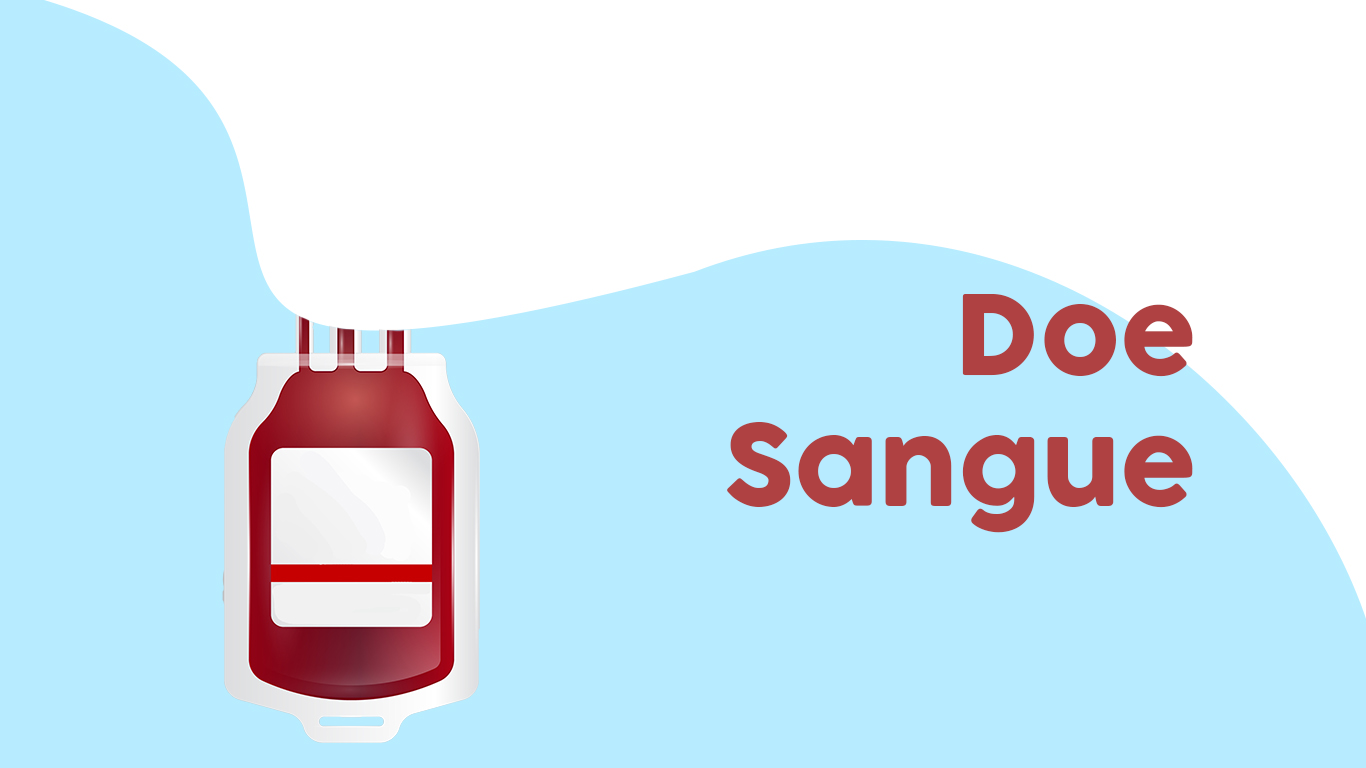
<style>
.page{position:relative;width:1366px;height:768px;background:#b7ebff}
.page>*{position:absolute;margin:0}
.t1{font:109px "Cocogoose";color:#af4142}
</style>
<div class="page">
<p class="t1" style="left:727px;top:294px;width:466px;height:239px;text-align:right">Doe<br>Sangue</p>
</div>
